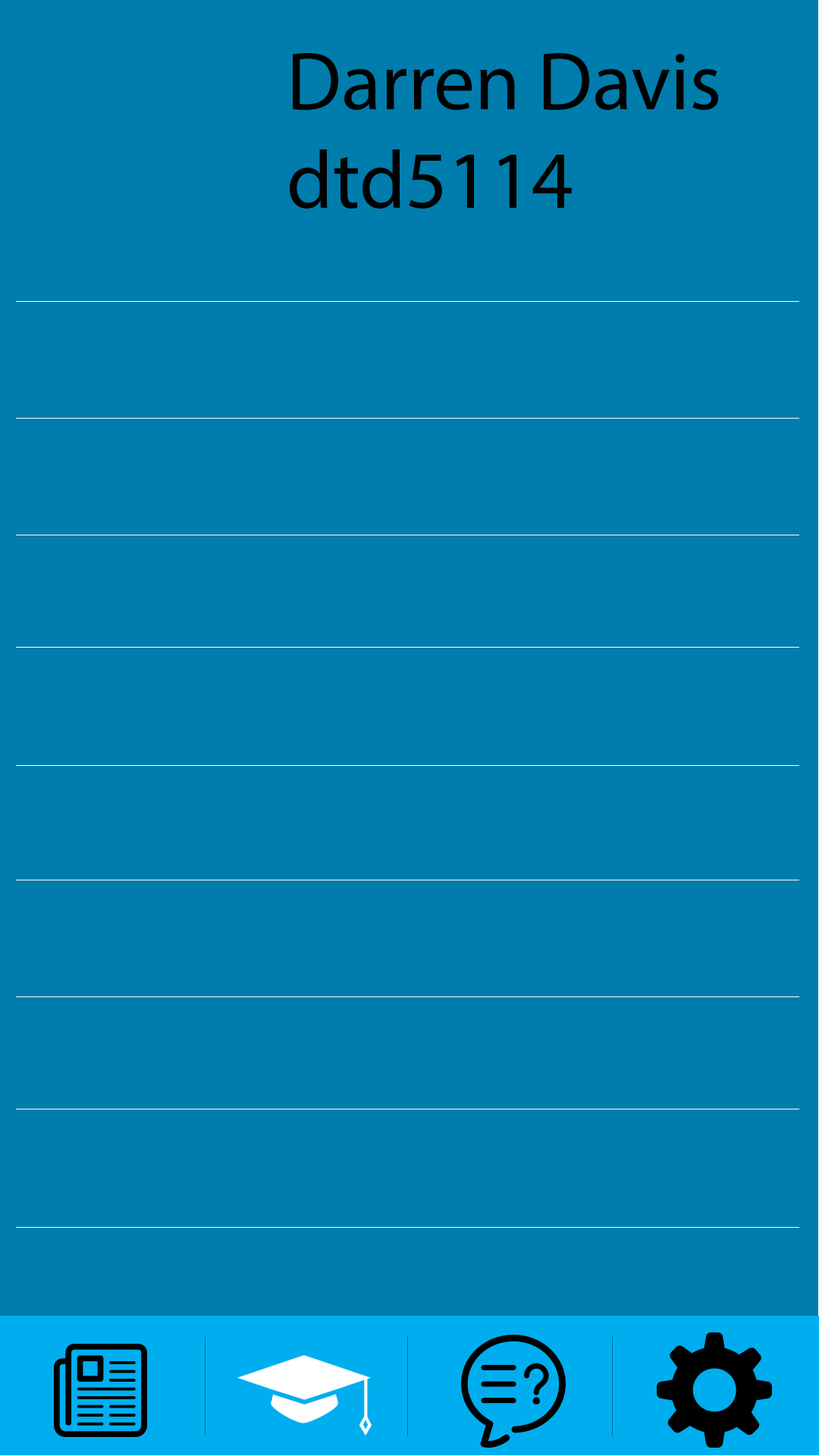
<style>
.page{position:relative;width:819px;height:1456px;background:#007dac}
.page>*{position:absolute;margin:0}
.t1{font:81.9px "MyriadPro-Regular";color:#000000}
</style>
<div class="page">
<p class="t1" style="left:290px;top:53px;width:429px;height:156px">Darren Davis<br>dtd5114</p>
</div>
